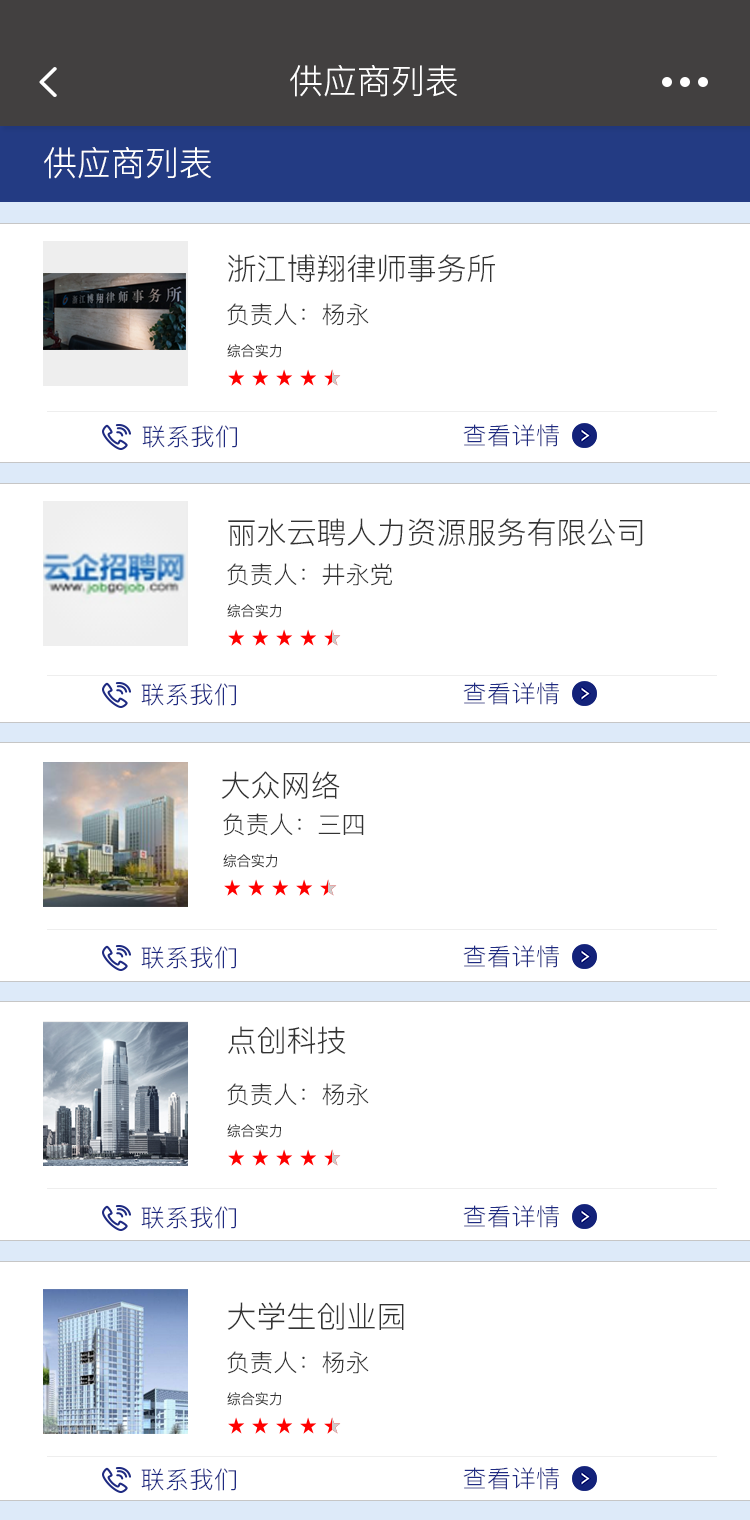
<style>
.page{position:relative;width:750px;height:1520px;background:#ffffff}
.page>*{position:absolute;margin:0}
.t1{font:34px "PingFang-SC-Regular";color:#ffffff}
.t2{font:30px "PingFang-SC-Regular";color:#333333}
.t3{font:24px "PingFang-SC-Regular";color:#333333}
.t4{font:14px "PingFang-SC-Regular";color:#333333}
.t5{font:24px "PingFang-SC-Regular";letter-spacing:0.02em;color:#1e2a82}
</style>
<div class="page">
<p class="t1" style="left:290px;top:65px;width:167px;height:32px">供应商列表</p>
<p class="t1" style="left:44px;top:147px;width:167px;height:32px">供应商列表</p>
<p class="t2" style="left:228px;top:254px;width:267px;height:28px">浙江博翔律师事务所</p>
<p class="t3" style="left:227px;top:303px;width:142px;height:23px">负责人：杨永</p>
<p class="t4" style="left:227px;top:344px;width:54px;height:14px">综合实力</p>
<p class="t5" style="left:142px;top:425px;width:95px;height:23px">联系我们</p>
<p class="t5" style="left:463px;top:424px;width:96px;height:23px">查看详情</p>
<p class="t2" style="left:228px;top:518px;width:415px;height:28px">丽水云聘人力资源服务有限公司</p>
<p class="t3" style="left:227px;top:563px;width:165px;height:23px">负责人：井永党</p>
<p class="t4" style="left:227px;top:604px;width:54px;height:14px">综合实力</p>
<p class="t5" style="left:141px;top:683px;width:95px;height:23px">联系我们</p>
<p class="t5" style="left:463px;top:682px;width:96px;height:23px">查看详情</p>
<p class="t2" style="left:221px;top:771px;width:119px;height:28px">大众网络</p>
<p class="t3" style="left:223px;top:813px;width:141px;height:23px">负责人：三四</p>
<p class="t4" style="left:223px;top:854px;width:54px;height:14px">综合实力</p>
<p class="t5" style="left:141px;top:946px;width:95px;height:23px">联系我们</p>
<p class="t5" style="left:463px;top:945px;width:96px;height:23px">查看详情</p>
<p class="t2" style="left:228px;top:1026px;width:118px;height:28px">点创科技</p>
<p class="t3" style="left:227px;top:1083px;width:142px;height:23px">负责人：杨永</p>
<p class="t4" style="left:227px;top:1124px;width:54px;height:14px">综合实力</p>
<p class="t5" style="left:141px;top:1206px;width:95px;height:23px">联系我们</p>
<p class="t5" style="left:463px;top:1205px;width:96px;height:23px">查看详情</p>
<p class="t2" style="left:227px;top:1302px;width:177px;height:28px">大学生创业园</p>
<p class="t3" style="left:227px;top:1351px;width:142px;height:23px">负责人：杨永</p>
<p class="t4" style="left:227px;top:1392px;width:54px;height:14px">综合实力</p>
<p class="t5" style="left:141px;top:1468px;width:95px;height:23px">联系我们</p>
<p class="t5" style="left:463px;top:1467px;width:96px;height:23px">查看详情</p>
</div>
